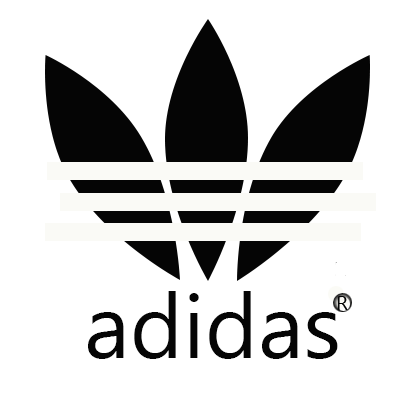
<style>
.page{position:relative;width:400px;height:400px;background:#ffffff}
.page>*{position:absolute;margin:0}
.t1{font:90px "MyanmarText";color:#050505}
</style>
<div class="page">
<p class="t1" style="left:88px;top:291px;width:250px;height:68px">adidas</p>
</div>
